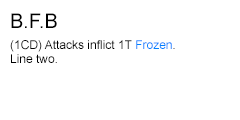
<style>
.page{position:relative;width:240px;height:120px;background:#ffffff}
.page>*{position:absolute;margin:0}
.t1{font:20px "ArialMT";color:#000000}
.t2{font:12px "ArialMT";color:#000000}
.t3{font:12px "ArialMT";color:#0080ff}
</style>
<div class="page">
<p class="t1" style="left:11px;top:13px;width:46px;height:15px">B.F.B</p>
<p class="t2" style="left:10px;top:40px;width:165px;height:23px">(1CD) Attacks inflict 1T <span class="t3">Frozen</span>.<br>Line two.</p>
</div>
